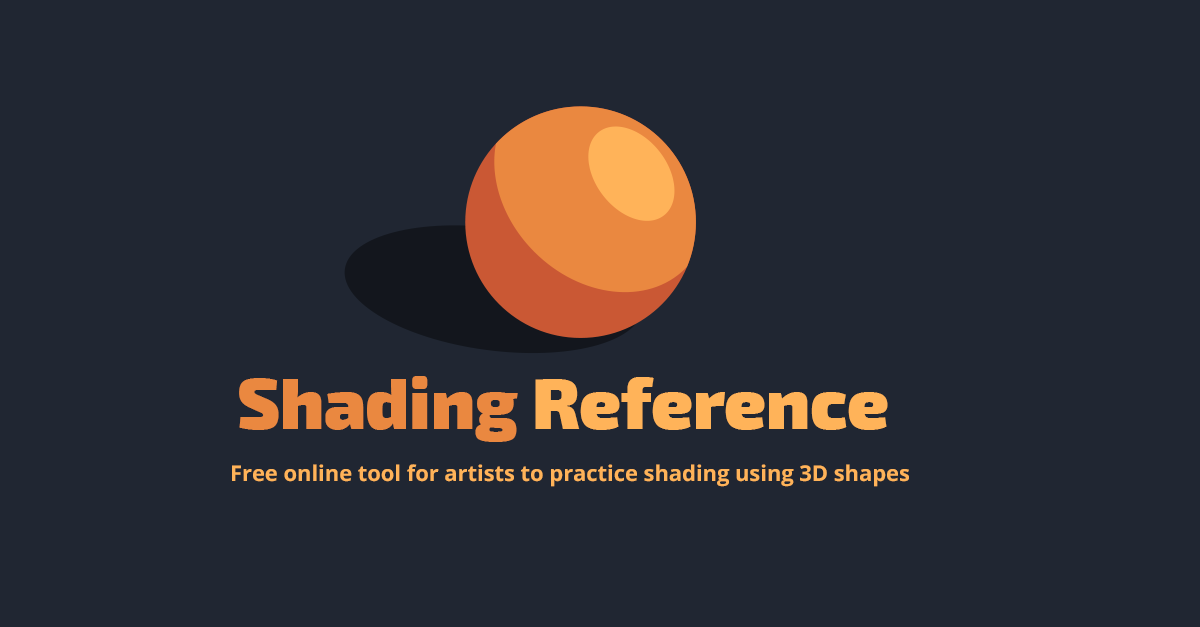
<style>
.page{position:relative;width:1200px;height:627px;background:#202632}
.page>*{position:absolute;margin:0}
.t1{font:70.6px "Exo2-Black";color:#ffb359}
.t2{font:70.6px "Exo2-Black";color:#ea8840}
.t3{font:21.9px "OpenSans-Bold";color:#ffb359}
</style>
<div class="page">
<p class="t1" style="left:239px;top:376px;width:649px;height:66px"><span class="t2">Shading </span>Reference</p>
<p class="t3" style="left:232px;top:464px;width:677px;height:23px">Free online tool for artists to practice shading using 3D shapes</p>
</div>
